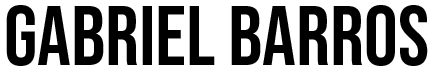
<style>
.page{position:relative;width:433px;height:73px;background:#ffffff}
.page>*{position:absolute;margin:0}
.t1{font:84.4px "BebasNeue-Regular";color:#000000}
</style>
<div class="page">
<p class="t1" style="left:6px;top:5px;width:422px;height:61px">gabriel barros</p>
</div>
